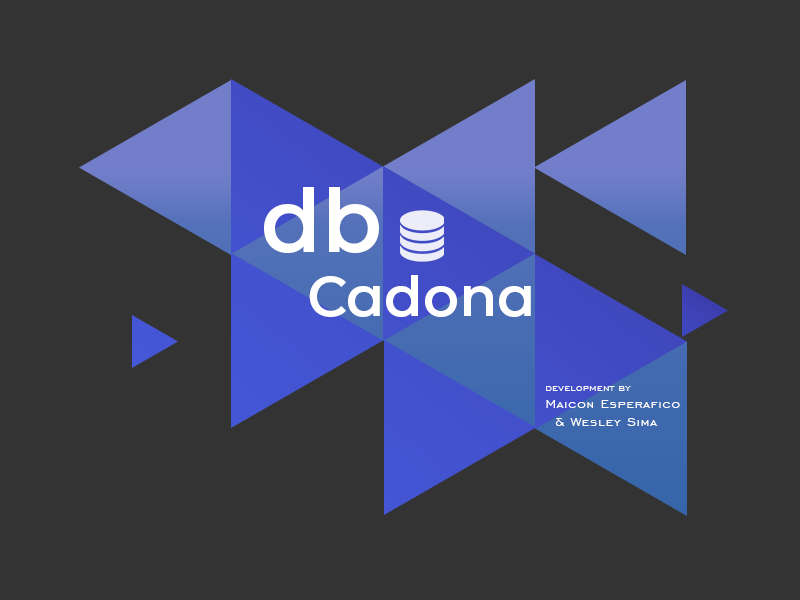
<style>
.page{position:relative;width:800px;height:600px;background:#333333}
.page>*{position:absolute;margin:0}
.t1{font:87.9px "MontserratAlternates-SemiBold";color:#ffffff}
.t2{font:55.6px "MontserratAlternates-SemiBold";color:#ffffff}
.t3{font:14.7px "EngraversGothicBT-Regular";letter-spacing:0.06em;color:#ffffff}
.t4{font:10px "EngraversGothicBT-Regular";letter-spacing:0.06em;color:#ffffff}
</style>
<div class="page">
<p class="t1" style="left:264px;top:187px;width:115px;height:66px">db</p>
<p class="t2" style="left:309px;top:275px;width:222px;height:42px">Cadona</p>
<p class="t3" style="left:546px;top:386px;width:134px;height:40px"><span class="t4">DEVELOPMENT BY<br></span>Maicon Esperafico <br>    &amp; Wesley Sima</p>
</div>
